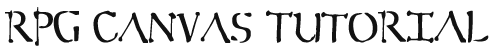
<style>
.page{position:relative;width:500px;height:50px;background:#ffffff}
.page>*{position:absolute;margin:0}
.t1{font:36.7px "Sever";color:#121212;font-weight:bold;scale:0.71 1}
</style>
<div class="page">
<p class="t1" style="left:5px;top:7px;width:484px;height:39px">RPG Canvas TutoRIAL</p>
</div>
